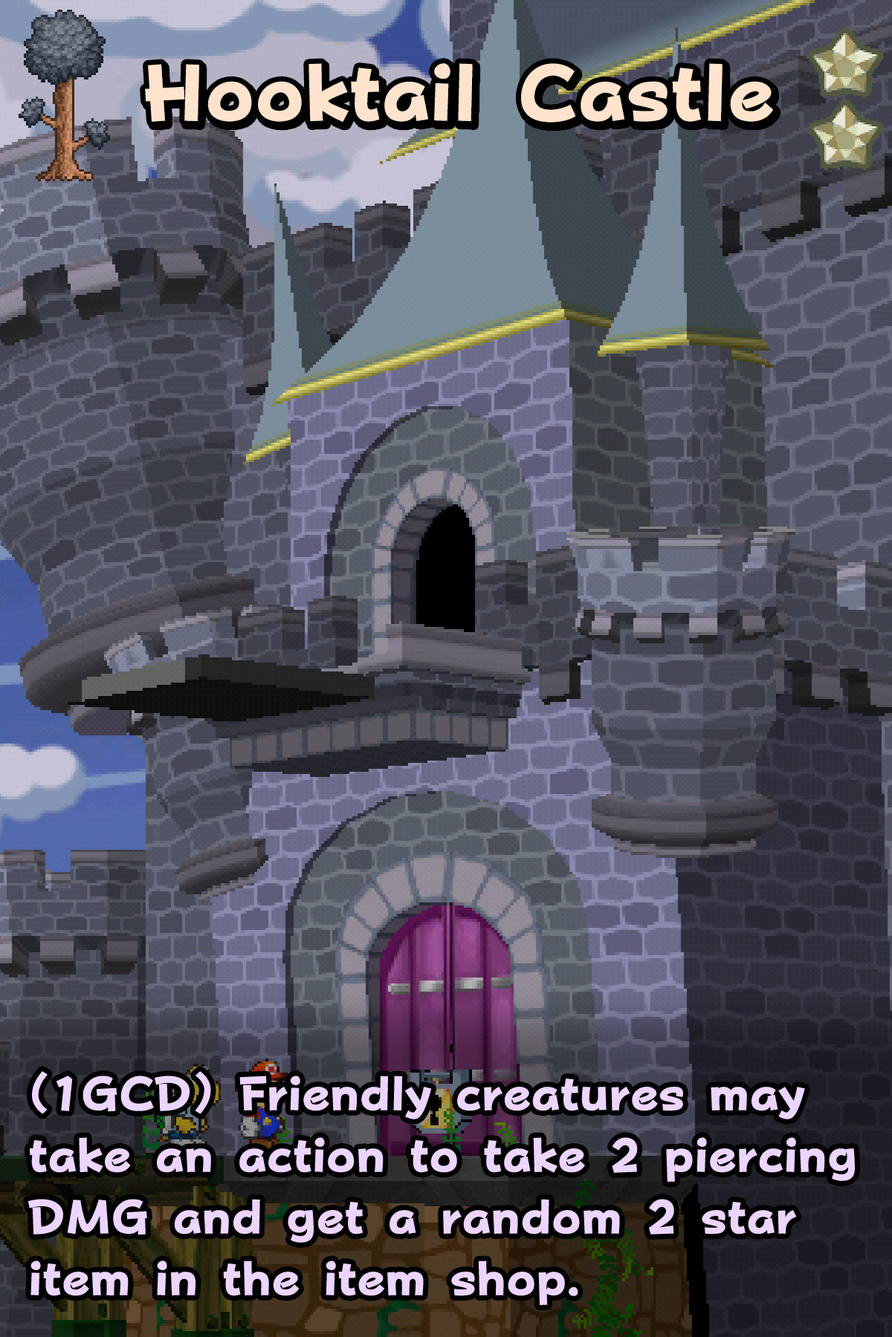
<style>
.page{position:relative;width:892px;height:1337px}
.page>*{position:absolute;margin:0}
.t1{font:136.7px "FOTPopHappinessStrp-ExtraBold";color:#ffe3cc}
.t2{font:81.7px/61.7px "FOTPopHappinessStrp-ExtraBold";color:#ecd5ff}
</style>
<div class="page">
<p class="t1" style="left:145px;top:63px;width:628px;height:60px">Hooktail Castle</p>
<p class="t2" style="left:27px;top:1071px;width:827px;height:234px">(1GCD) Friendly creatures may take an action to take 2 piercing DMG and get a random 2 star item in the item shop.</p>
</div>
